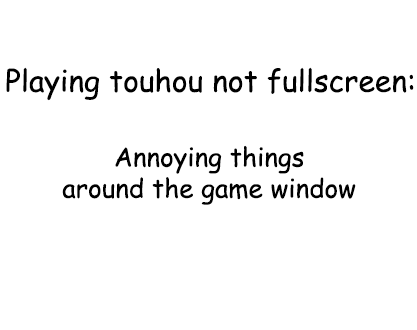
<style>
.page{position:relative;width:417px;height:330px;background:#ffffff}
.page>*{position:absolute;margin:0}
.t1{font:30px "ComicSansMS";color:#000000}
.t2{font:26px "ComicSansMS";color:#000000}
</style>
<div class="page">
<p class="t1" style="left:6px;top:67px;width:408px;height:34px">Playing touhou not fullscreen:</p>
<p class="t2" style="left:62px;top:145px;width:294px;height:60px;text-align:center">Annoying things<br>around the game window</p>
</div>
